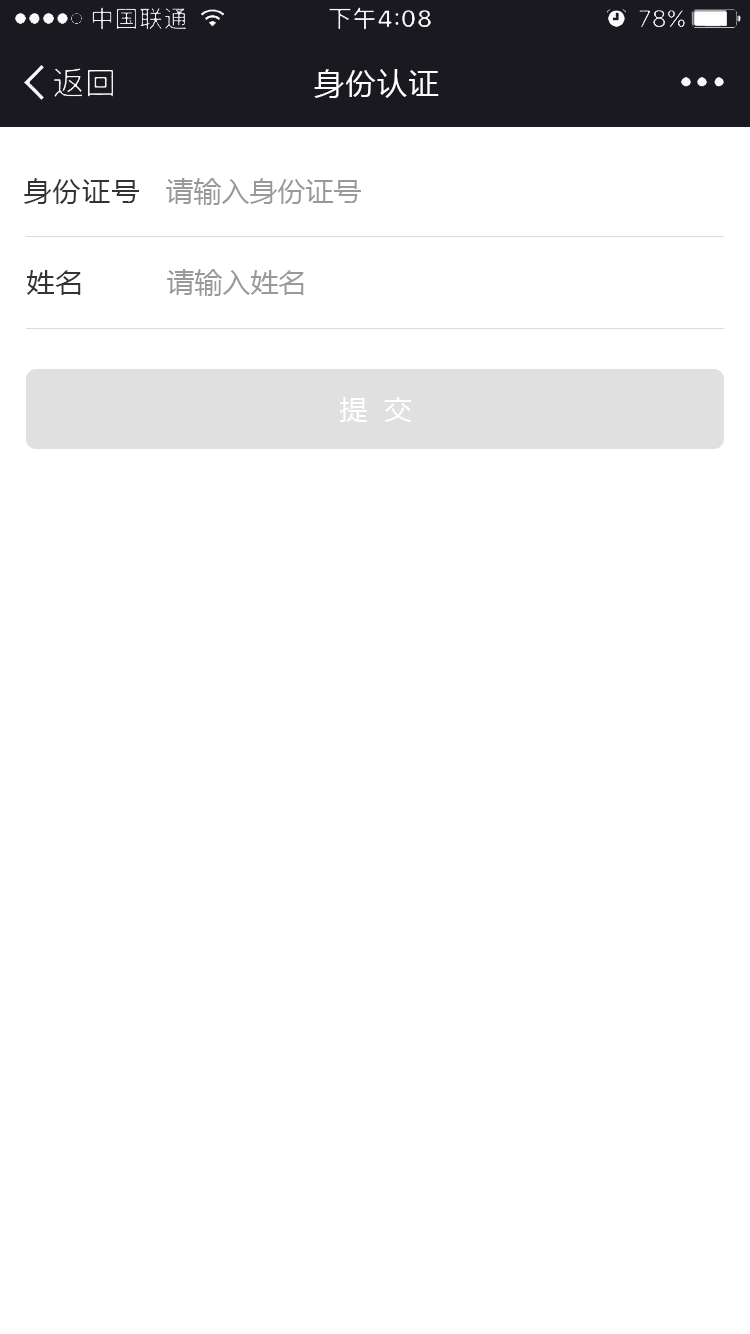
<style>
.page{position:relative;width:750px;height:1334px;background:#ffffff}
.page>*{position:absolute;margin:0}
.t1{font:30px "MicrosoftYaHei";letter-spacing:0.05em;color:#fffefe}
.t2{font:28px "MicrosoftYaHei";letter-spacing:0.05em;color:#333333}
.t3{font:28px "MicrosoftYaHei";color:#999999}
.t4{font:28px "MicrosoftYaHei";color:#ffffff}
</style>
<div class="page">
<p class="t1" style="left:314px;top:69px;width:125px;height:29px">身份认证</p>
<p class="t2" style="left:24px;top:178px;width:115px;height:26px">身份证号</p>
<p class="t3" style="left:166px;top:178px;width:195px;height:27px">请输入身份证号</p>
<p class="t2" style="left:26px;top:270px;width:55px;height:25px">姓名</p>
<p class="t3" style="left:167px;top:269px;width:137px;height:27px">请输入姓名</p>
<p class="t4" style="left:339px;top:397px;width:73px;height:25px">提  交</p>
</div>
